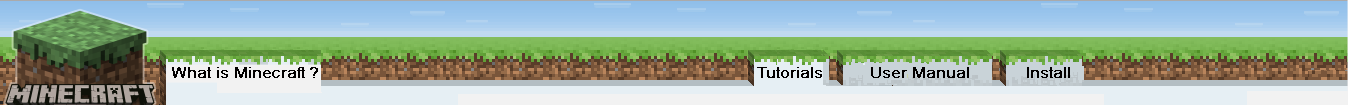
<style>
.page{position:relative;width:1348px;height:105px}
.page>*{position:absolute;margin:0}
.t1{font:14.6px "ArialNarrow";color:#020000;font-weight:bold;scale:1.3 1}
</style>
<div class="page">
<p class="t1" style="left:172px;top:67px;width:146px;height:11px">What is Minecraft ?</p>
<p class="t1" style="left:757px;top:67px;width:65px;height:11px">Tutorials</p>
<p class="t1" style="left:871px;top:67px;width:98px;height:11px">User Manual</p>
<p class="t1" style="left:1027px;top:67px;width:43px;height:11px">Install</p>
</div>
